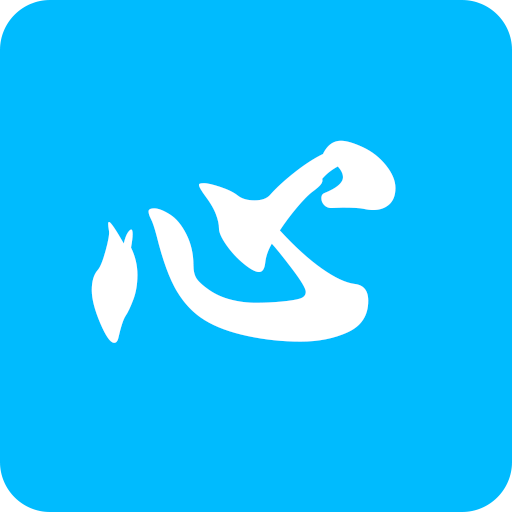
<style>
.page{position:relative;width:512px;height:512px;background:#00bbfe}
.page>*{position:absolute;margin:0}
.t1{font:400px "STXingkai";color:#ffffff}
</style>
<div class="page">
<p class="t1" style="left:91px;top:140px;width:305px;height:203px">心</p>
</div>
